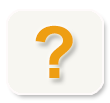
<style>
.page{position:relative;width:110px;height:103px;background:#f7f6f1}
.page>*{position:absolute;margin:0}
.t1{font:72px "Arial-BoldMT";color:#ee9e12}
</style>
<div class="page">
<p class="t1" style="left:35px;top:25px;width:38px;height:53px">?</p>
</div>
